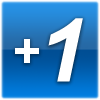
<style>
.page{position:relative;width:100px;height:100px}
.page>*{position:absolute;margin:0}
.t1{font:88px "Arial-BoldItalicMT";color:#ffffff}
.t2{font:49px "Arial-BoldMT";color:#ffffff}
</style>
<div class="page">
<p class="t1" style="left:48px;top:18px;width:35px;height:64px">1</p>
<p class="t2" style="left:15px;top:39px;width:24px;height:24px">+</p>
</div>
